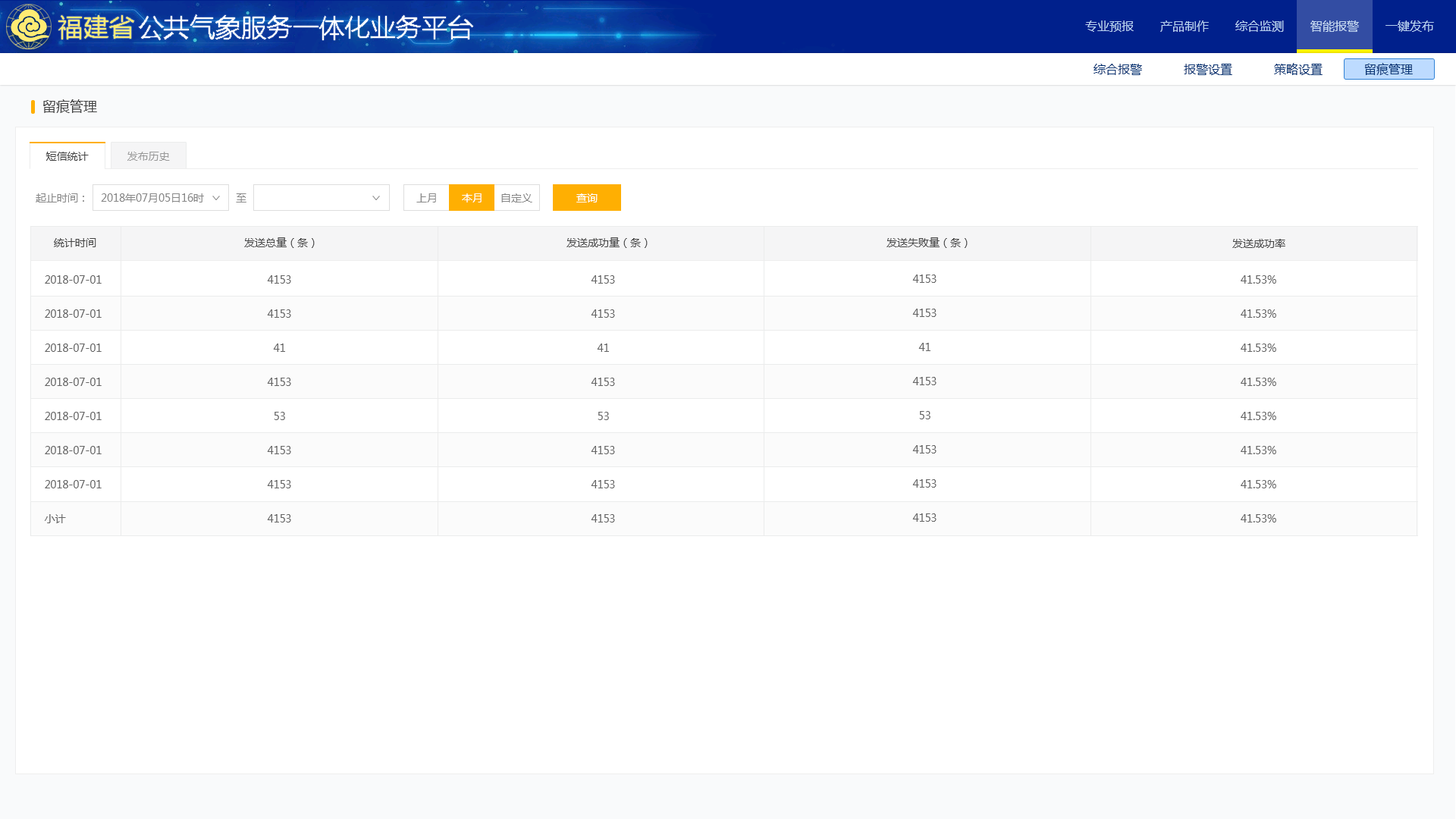
<style>
.page{position:relative;width:1456px;height:819px;background:#ffffff}
.page>*{position:absolute;margin:0}
.t1{font:12.1px "MicrosoftYaHei";color:#b5cfef;text-transform:uppercase}
.t2{font:12.1px "MicrosoftYaHei";color:#083473;text-transform:uppercase}
.t3{font:13.6px "MicrosoftYaHei";color:#444444;text-transform:uppercase}
.t4{font:10.6px "MicrosoftYaHei";color:#444444;text-transform:uppercase}
.t5{font:10.6px "MicrosoftYaHei";color:#999999;text-transform:uppercase}
.t6{font:10.6px "MicrosoftYaHei";color:#888888;text-transform:uppercase}
.t7{font:10.6px "MicrosoftYaHei";color:#ffffff;text-transform:uppercase}
.t8{font:10.6px/34.1px "MicrosoftYaHei";color:#666666;text-transform:uppercase}
</style>
<div class="page">
<p class="t1" style="left:1085px;top:20px;width:349px;height:12px">专业预报       产品制作       综合监测       智能报警       一键发布</p>
<p class="t2" style="left:1094px;top:63px;width:319px;height:12px">综合报警           报警设置           策略设置           留痕管理</p>
<p class="t3" style="left:43px;top:99px;width:54px;height:14px">留痕管理</p>
<p class="t4" style="left:45px;top:152px;width:44px;height:9px">短信统计</p>
<p class="t5" style="left:127px;top:152px;width:43px;height:9px">发布历史</p>
<p class="t6" style="left:36px;top:193px;width:48px;height:9px">起止时间：</p>
<p class="t6" style="left:101px;top:193px;width:103px;height:9px">2018年07月05日16时</p>
<p class="t6" style="left:236px;top:193px;width:10px;height:9px">至</p>
<p class="t6" style="left:416px;top:193px;width:20px;height:9px">上月</p>
<p class="t7" style="left:462px;top:193px;width:20px;height:9px">本月</p>
<p class="t6" style="left:501px;top:193px;width:31px;height:9px">自定义</p>
<p class="t7" style="left:576px;top:193px;width:22px;height:9px">查询</p>
<p class="t4" style="left:54px;top:238px;width:42px;height:9px">统计时间</p>
<p class="t4" style="left:244px;top:237px;width:71px;height:11px">发送总量（条）</p>
<p class="t4" style="left:566px;top:237px;width:82px;height:11px">发送成功量（条）</p>
<p class="t4" style="left:886px;top:237px;width:82px;height:11px">发送失败量（条）</p>
<p class="t4" style="left:1232px;top:239px;width:53px;height:9px">发送成功率</p>
<p class="t8" style="left:45px;top:275px;width:57px;height:248px">2018-07-01<br>2018-07-01<br>2018-07-01<br>2018-07-01<br>2018-07-01<br>2018-07-01<br>2018-07-01<br>小计</p>
<p class="t8" style="left:267px;top:275px;width:24px;height:247px;text-align:center">4153<br>4153<br>41<br>4153<br>53<br>4153<br>4153<br>4153</p>
<p class="t8" style="left:591px;top:275px;width:24px;height:247px;text-align:center">4153<br>4153<br>41<br>4153<br>53<br>4153<br>4153<br>4153</p>
<p class="t8" style="left:912px;top:275px;width:25px;height:247px;text-align:center">4153<br>4153<br>41<br>4153<br>53<br>4153<br>4153<br>4153</p>
<p class="t8" style="left:1241px;top:275px;width:35px;height:247px;text-align:center">41.53%<br>41.53%<br>41.53%<br>41.53%<br>41.53%<br>41.53%<br>41.53%<br>41.53%</p>
</div>
